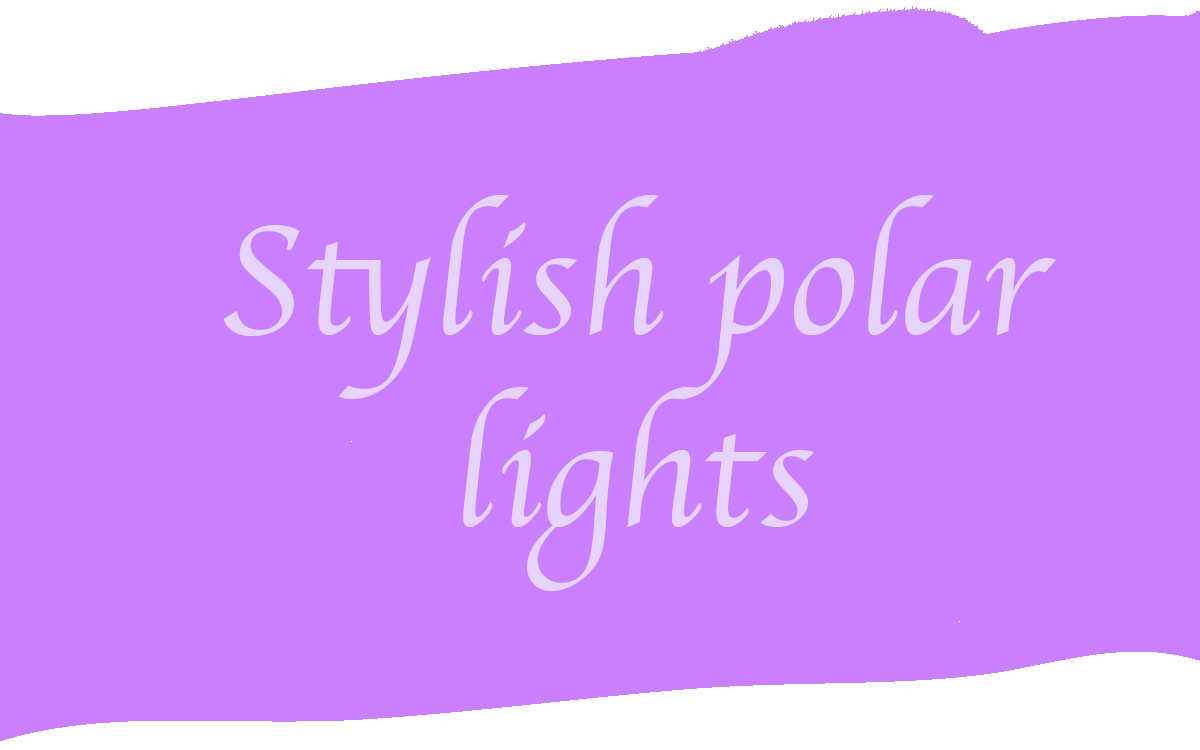
<style>
.page{position:relative;width:1200px;height:750px;background:#ca7fff}
.page>*{position:absolute;margin:0}
.t1{font:160px "Apple-Chancery";color:#e7d3ff}
</style>
<div class="page">
<p class="t1" style="left:223px;top:195px;width:833px;height:396px;text-align:center">Stylish polar<br>lights</p>
</div>
